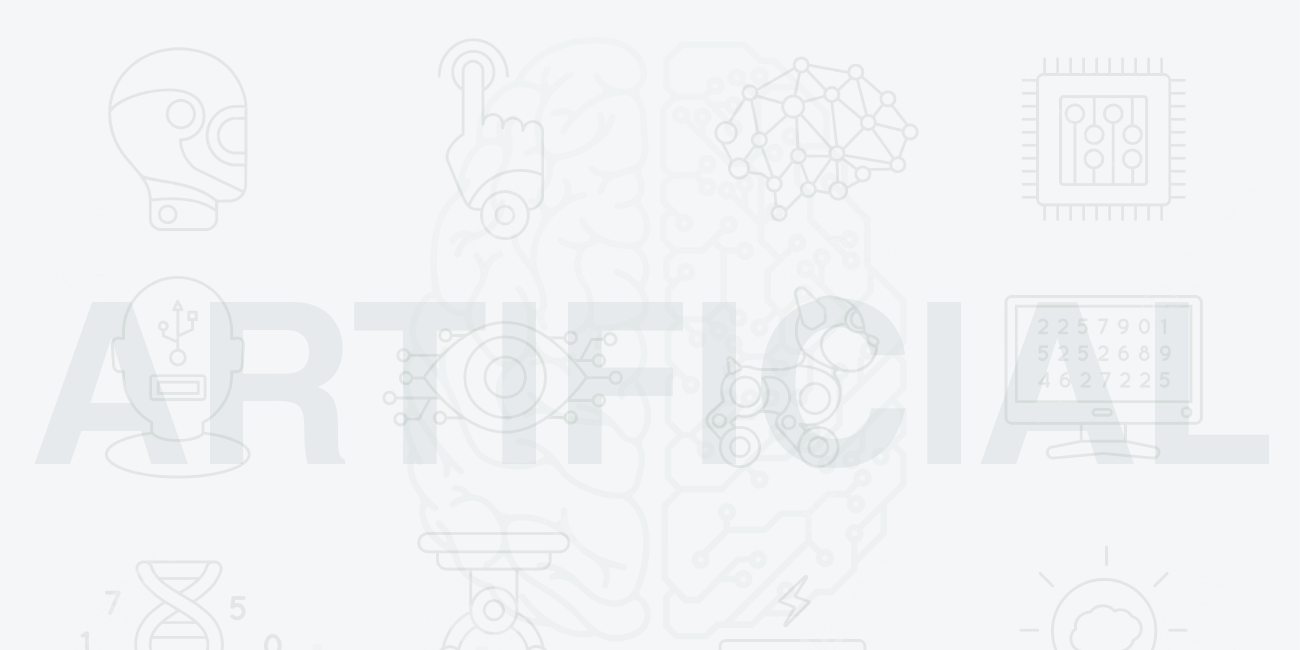
<style>
.page{position:relative;width:1300px;height:650px;background:#f5f6f8}
.page>*{position:absolute;margin:0}
.t1{font:225px "HelveticaCE-Bold";color:#e7eaec;text-transform:uppercase}
</style>
<div class="page">
<p class="t1" style="left:34px;top:298px;width:1236px;height:170px">artificial</p>
</div>
